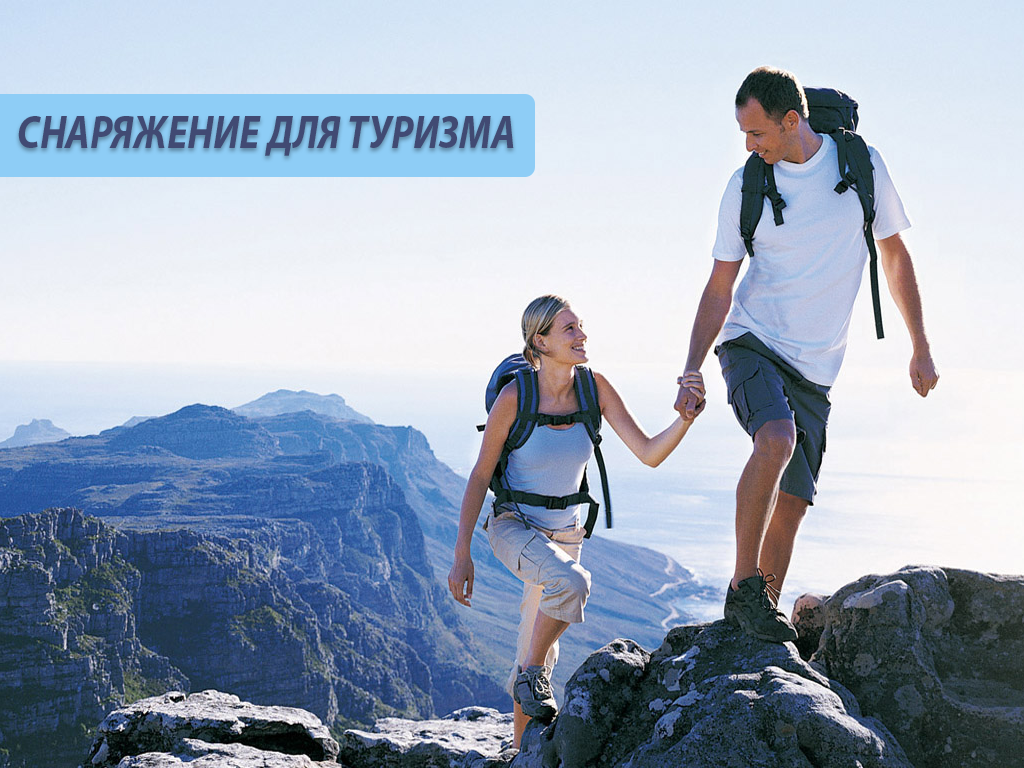
<style>
.page{position:relative;width:1024px;height:768px}
.page>*{position:absolute;margin:0}
.t1{font:46px "MyriadPro-BoldIt";color:#414a73;scale:0.85 1}
</style>
<div class="page">
<p class="t1" style="left:18px;top:116px;width:496px;height:40px">СНАРЯЖЕНИЕ ДЛЯ ТУРИЗМА</p>
</div>
